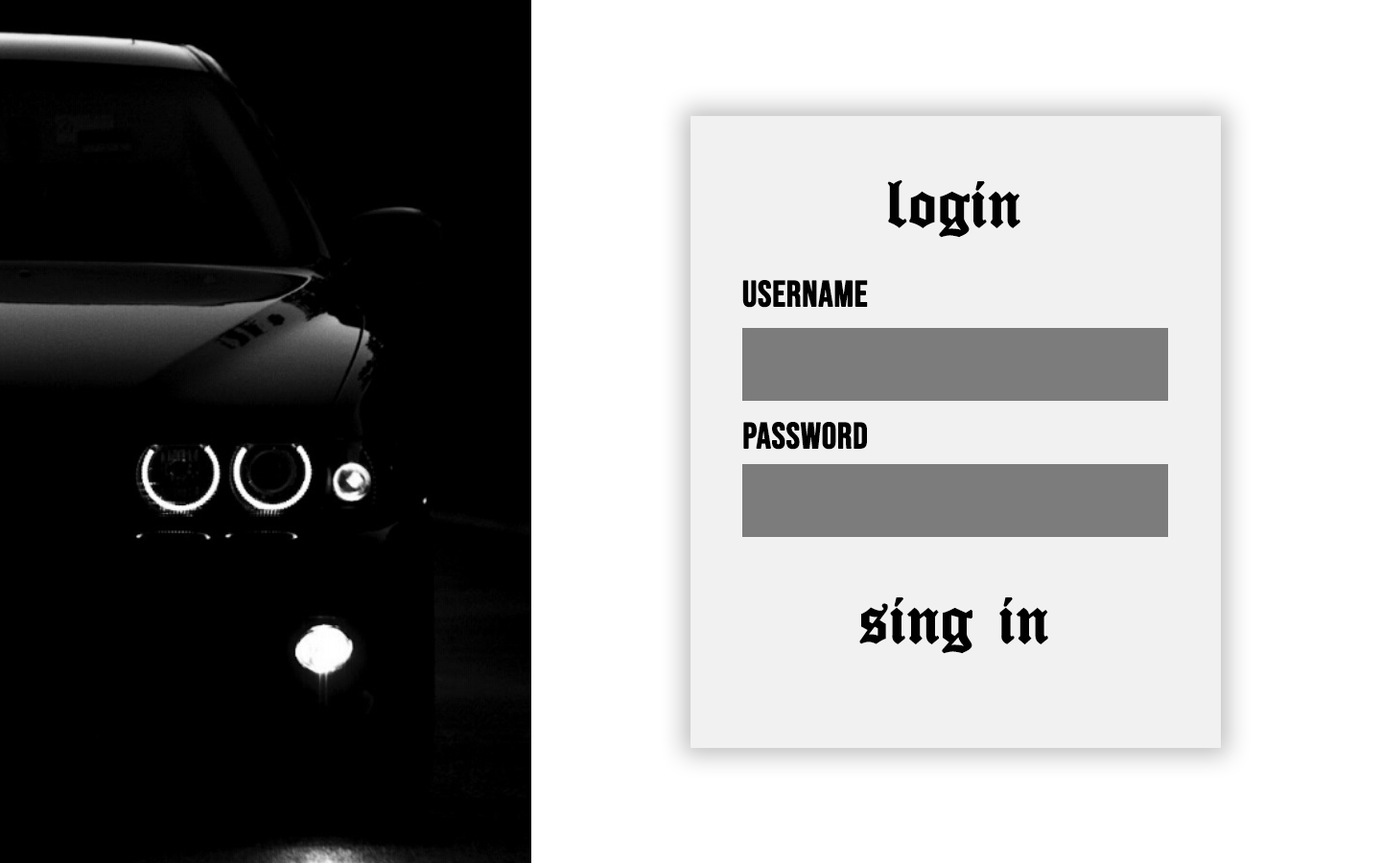
<style>
.page{position:relative;width:1381px;height:863px;background:#000000}
.page>*{position:absolute;margin:0}
.t1{font:71.9px "OldLondonAlternate";color:#010101;font-weight:bold}
.t2{font:36.2px "BebasNeue-Regular";color:#010101;font-weight:bold}
</style>
<div class="page">
<p class="t1" style="left:887px;top:180px;width:134px;height:58px">login</p>
<p class="t2" style="left:742px;top:280px;width:126px;height:28px">username</p>
<p class="t2" style="left:743px;top:422px;width:124px;height:28px">password</p>
<p class="t1" style="left:859px;top:598px;width:189px;height:56px">sing in</p>
</div>
